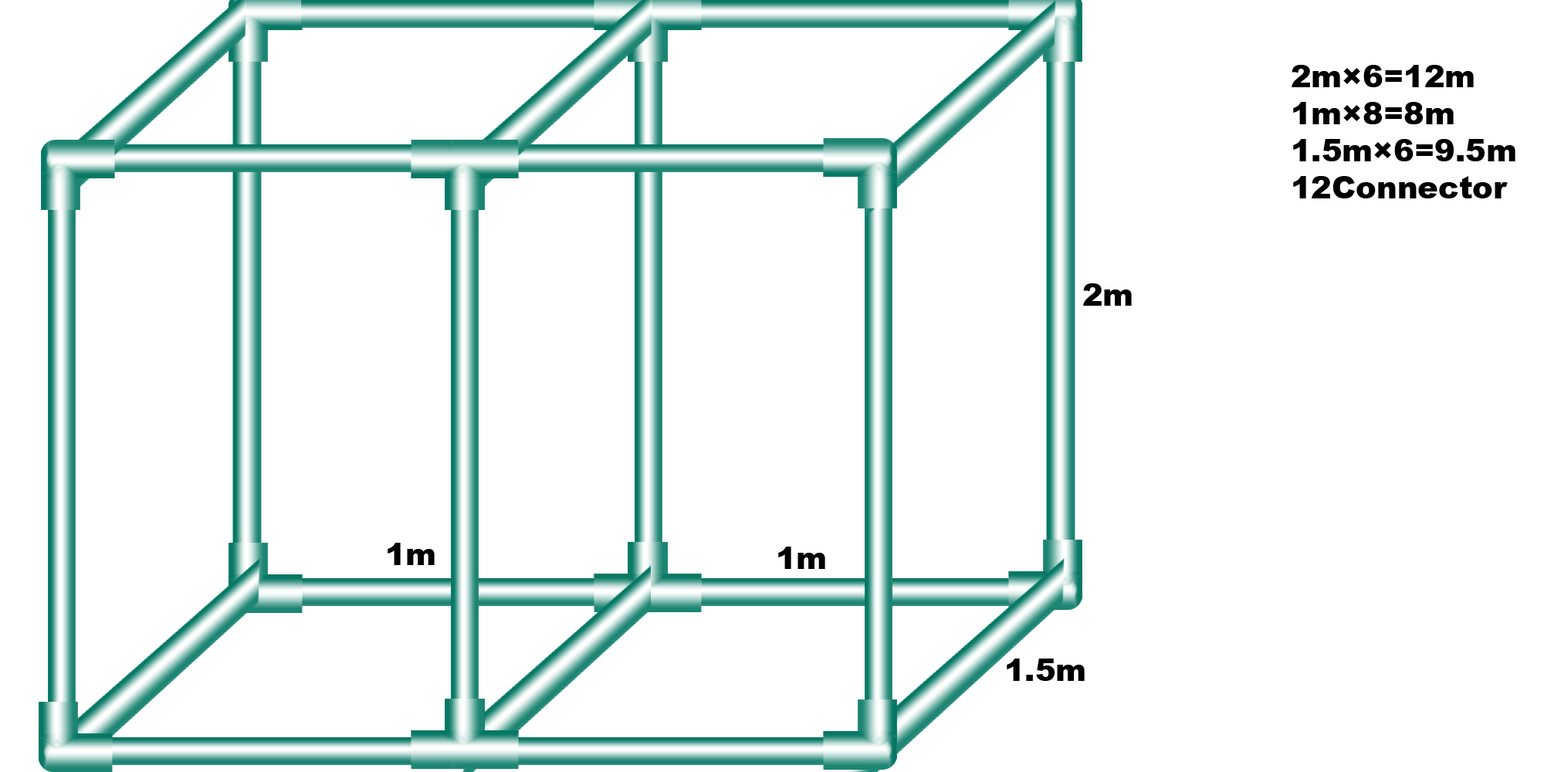
<style>
.page{position:relative;width:1544px;height:772px;background:#ffffff}
.page>*{position:absolute;margin:0}
.t1{font:30.9px "Arial-Black";color:#000000}
</style>
<div class="page">
<p class="t1" style="left:1292px;top:65px;width:224px;height:133px">2m×6=12m<br>1m×8=8m<br>1.5m×6=9.5m<br>12Connector</p>
<p class="t1" style="left:1083px;top:283px;width:49px;height:23px">2m</p>
<p class="t1" style="left:388px;top:543px;width:47px;height:22px">1m</p>
<p class="t1" style="left:778px;top:547px;width:47px;height:22px">1m</p>
<p class="t1" style="left:1007px;top:659px;width:78px;height:22px">1.5m</p>
</div>
